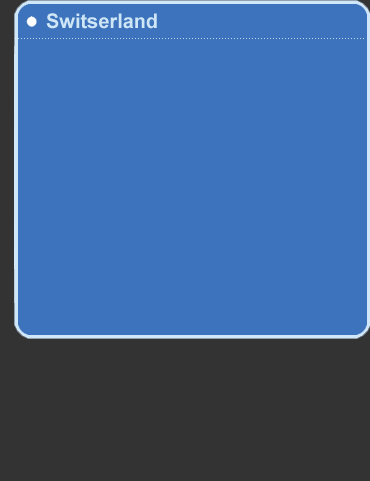
<style>
.page{position:relative;width:370px;height:481px;background:#3c73bc}
.page>*{position:absolute;margin:0}
.t1{font:20px "Arial-BoldMT";color:#cee6f6}
</style>
<div class="page">
<p class="t1" style="left:46px;top:13px;width:111px;height:16px">Switserland</p>
</div>
